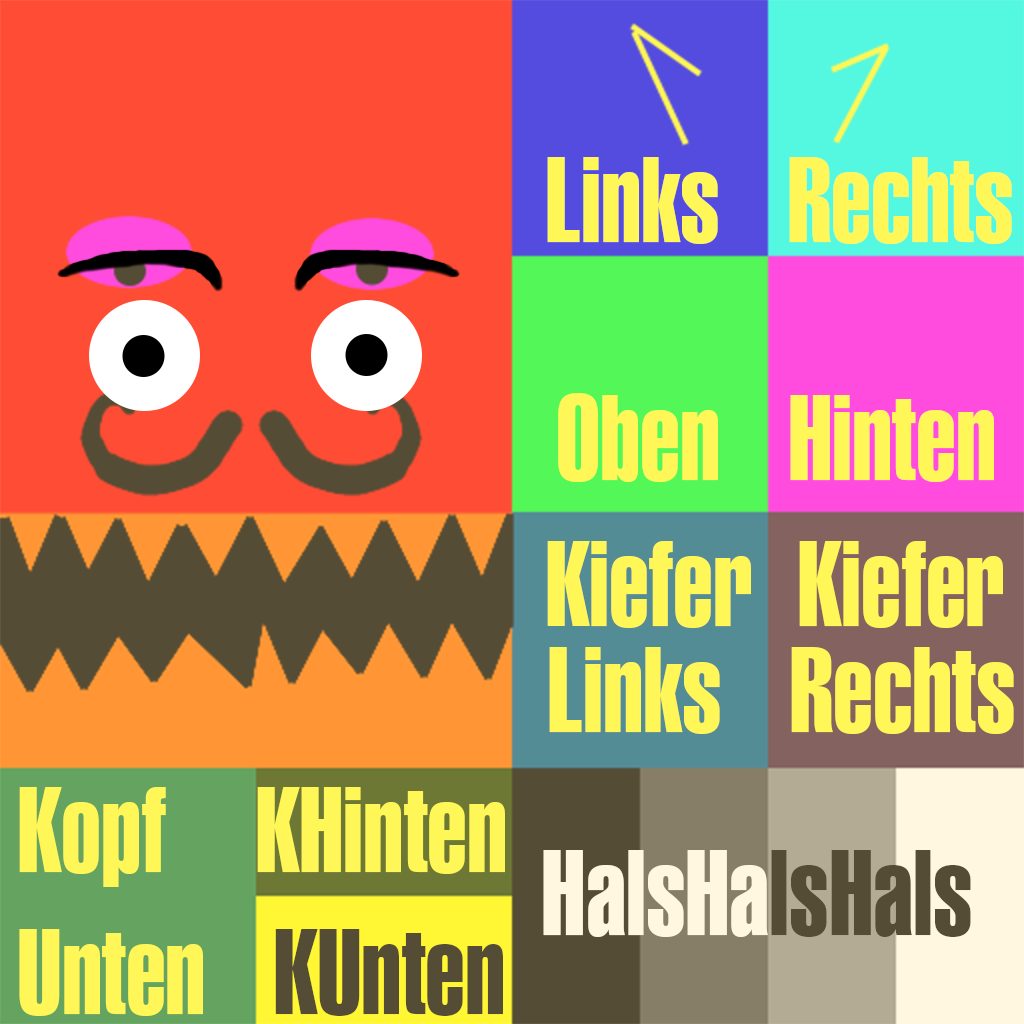
<style>
.page{position:relative;width:1024px;height:1024px;background:#ff4c34}
.page>*{position:absolute;margin:0}
.t1{font:118px "Swiss911BT-ExtraCompressed";color:#fff758}
</style>
<div class="page">
<p class="t1" style="left:547px;top:157px;width:465px;height:87px">Links   Rechts</p>
<p class="t1" style="left:558px;top:393px;width:436px;height:89px">Oben   Hinten</p>
<p class="t1" style="left:547px;top:541px;width:456px;height:87px">Kiefer  Kiefer</p>
<p class="t1" style="left:549px;top:647px;width:465px;height:87px">Links   Rechts</p>
<p class="t1" style="left:19px;top:787px;width:486px;height:229px">Kopf    KHinten<br>Unten   KUnten</p>
</div>
